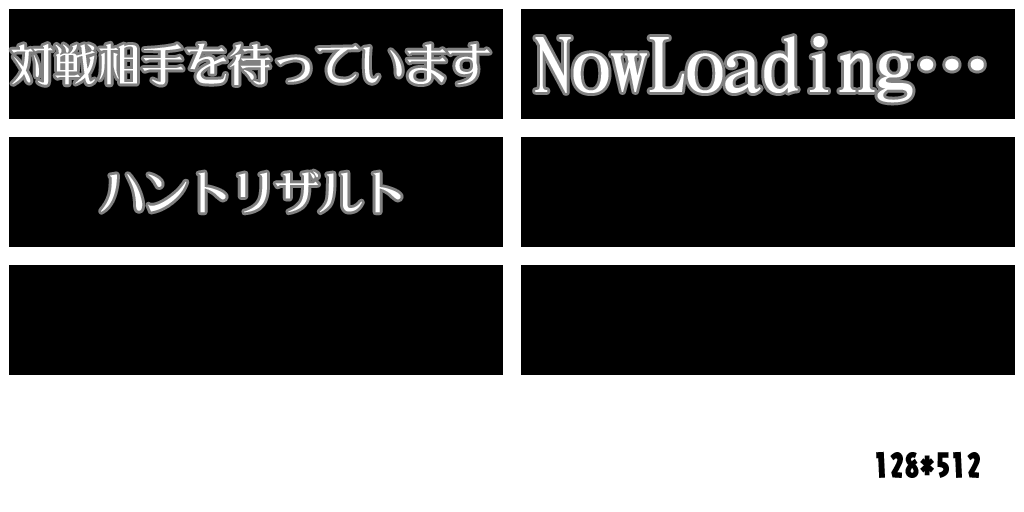
<style>
.page{position:relative;width:1024px;height:512px;background:#000000}
.page>*{position:absolute;margin:0}
.t1{font:75.9px "DFLeiGaSo-W5-WIN-RKSJ-H";color:#ffffff}
.t2{font:43.8px "DFLeiGaSo-W5-WIN-RKSJ-H";color:#ffffff}
.t3{font:30.8px "NIS-JYA-U-83pv-RKSJ-H";color:#000000}
</style>
<div class="page">
<p class="t1" style="left:535px;top:36px;width:449px;height:67px">NowLoading…</p>
<p class="t2" style="left:11px;top:43px;width:479px;height:42px">対戦相手を待っています</p>
<p class="t2" style="left:101px;top:171px;width:300px;height:42px">ハントリザルト</p>
<p class="t3" style="left:876px;top:451px;width:104px;height:27px">128*512</p>
</div>
